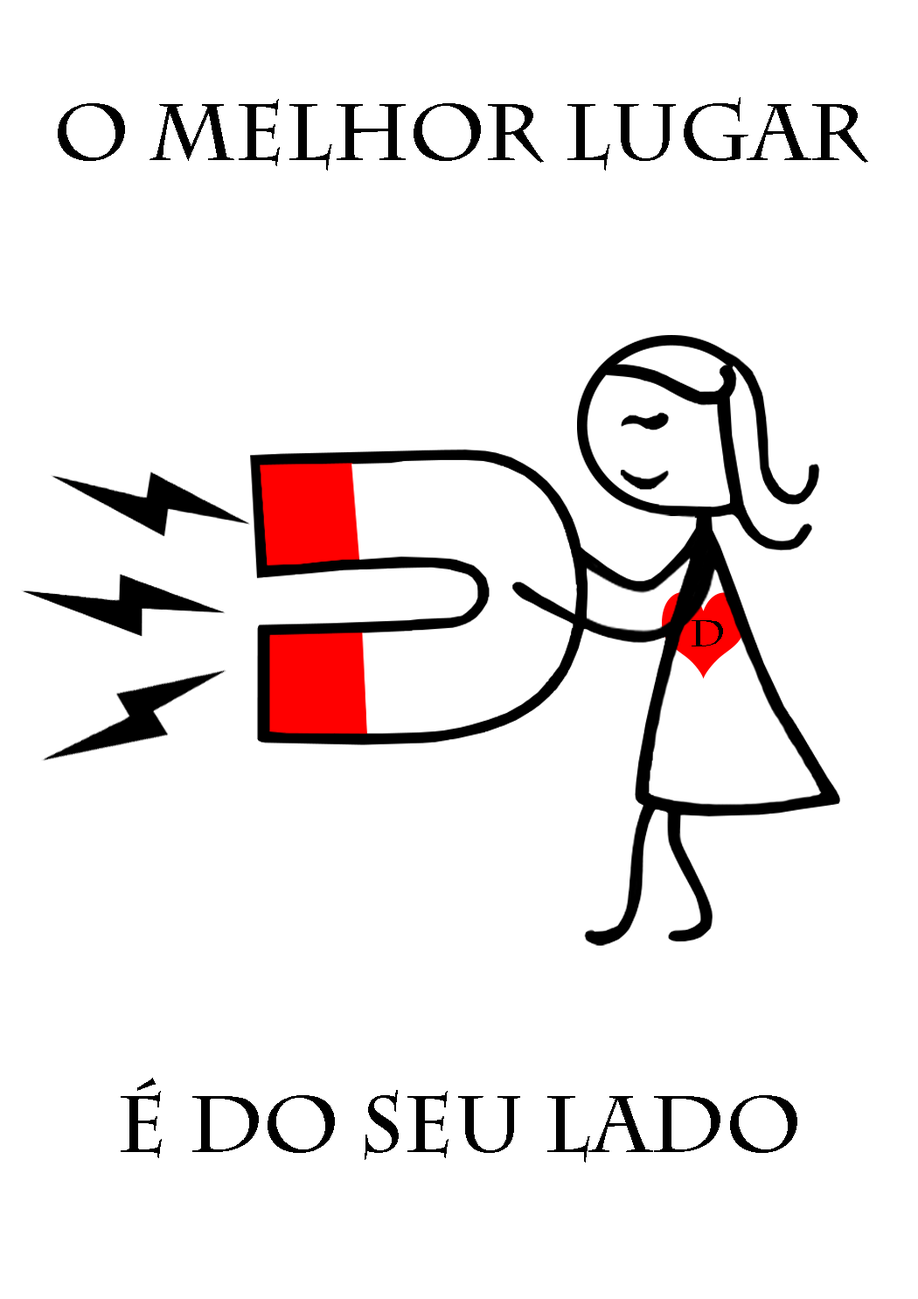
<style>
.page{position:relative;width:918px;height:1299px;background:#ffffff}
.page>*{position:absolute;margin:0}
.t1{font:80.2px "CharlemagneStd-Bold";color:#000000}
.t2{font:37.4px "CharlemagneStd-Bold";color:#000000}
</style>
<div class="page">
<p class="t1" style="left:58px;top:97px;width:810px;height:74px">O Melhor Lugar</p>
<p class="t2" style="left:692px;top:620px;width:31px;height:26px">D</p>
<p class="t1" style="left:121px;top:1077px;width:677px;height:85px">é do seu lado</p>
</div>
